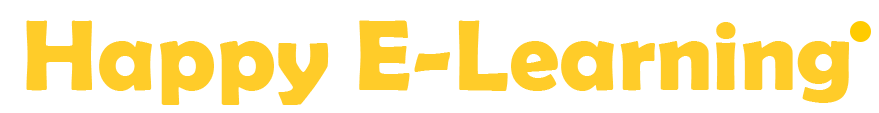
<style>
.page{position:relative;width:879px;height:113px;background:#ffffff}
.page>*{position:absolute;margin:0}
.t1{font:100px "BerlinSansFBDemi-Bold";color:#ffcc29}
</style>
<div class="page">
<p class="t1" style="left:26px;top:20px;width:823px;height:85px">Happy E-Learning</p>
</div>
